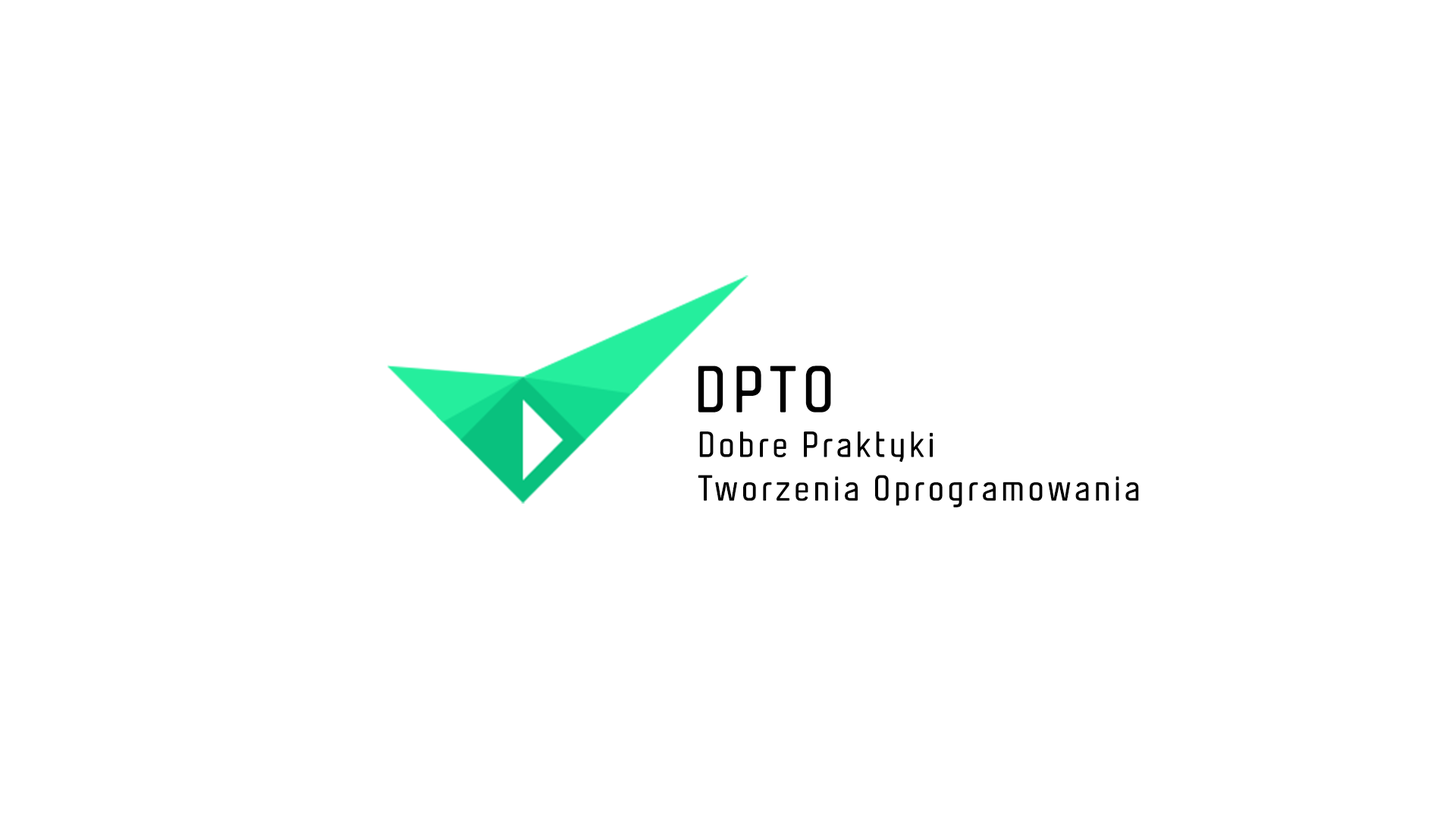
<style>
.page{position:relative;width:1456px;height:819px;background:#ffffff}
.page>*{position:absolute;margin:0}
.t1{font:65.8px "Malleable-FP-Regular";letter-spacing:0.1em;color:#000000}
.t2{font:36.3px "Malleable-FP-Regular";letter-spacing:0.1em;color:#000000}
</style>
<div class="page">
<p class="t1" style="left:698px;top:366px;width:133px;height:47px">DPTO</p>
<p class="t2" style="left:698px;top:431px;width:441px;height:76px">Dobre Praktyki<br>Tworzenia Oprogramowania</p>
</div>
